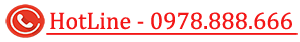
<style>
.page{position:relative;width:300px;height:42px;background:#ffffff}
.page>*{position:absolute;margin:0}
.t1{font:24.2px "Cambria";color:#f31616}
</style>
<div class="page">
<p class="t1" style="left:50px;top:12px;width:242px;height:18px">HotLine - 0978.888.666</p>
</div>
